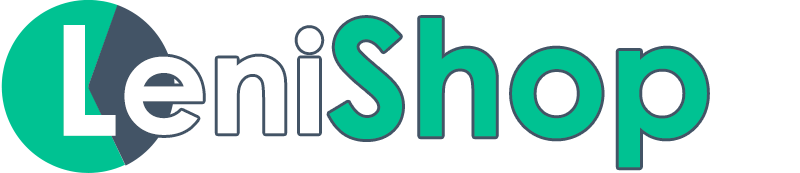
<style>
.page{position:relative;width:800px;height:173px;background:#ffffff}
.page>*{position:absolute;margin:0}
.t1{font:154px "CenturyGothic-Bold";color:#ffffff}
.t2{font:140px "CenturyGothic-Bold";color:#ffffff}
.t3{font:160px "CenturyGothic-Bold";color:#00c292}
</style>
<div class="page">
<p class="t1" style="left:63px;top:25px;width:53px;height:111px">L</p>
<p class="t2" style="left:124px;top:28px;width:198px;height:107px">eni</p>
<p class="t3" style="left:329px;top:18px;width:378px;height:150px">Shop</p>
</div>
